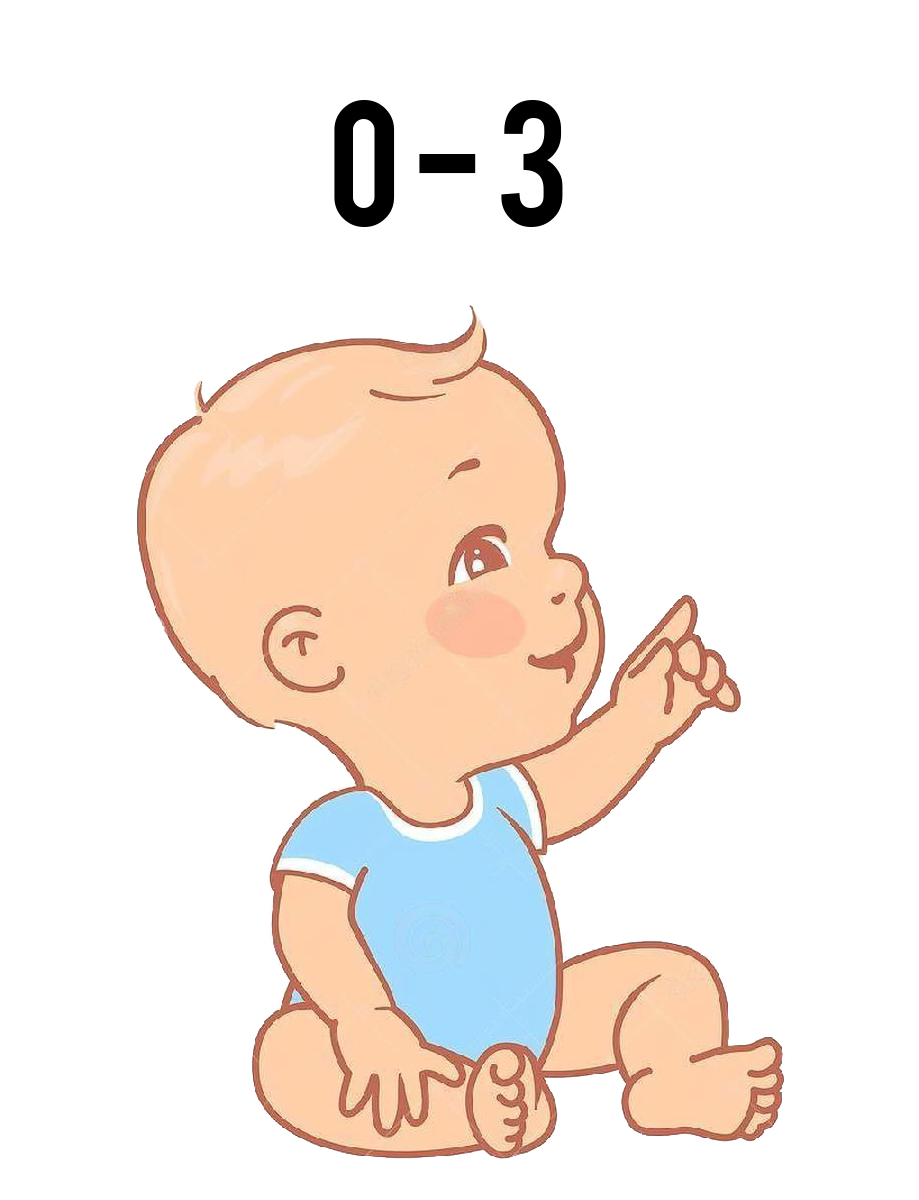
<style>
.page{position:relative;width:919px;height:1200px;background:#ffffff}
.page>*{position:absolute;margin:0}
.t1{font:140px "Bebas";color:#000000}
</style>
<div class="page">
<p class="t1" style="left:334px;top:100px;width:229px;height:127px">0 - 3</p>
</div>
